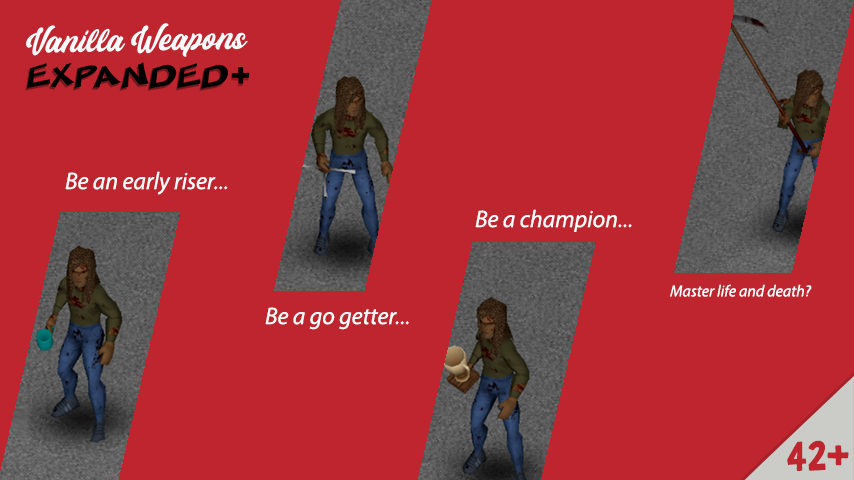
<style>
.page{position:relative;width:854px;height:480px;background:#be252e}
.page>*{position:absolute;margin:0}
.t1{font:30px "Helmida-Regular";color:#ffffff}
.t2{font:18px "Helmida-Regular";color:#000000}
.t3{font:28px "SFMincedMeatExtended";color:#000000}
.t4{font:30px "GranstanderClean"}
.t5{font:30px "GranstanderClean";color:#000000}
.t6{font:24px "MyriadPro-It";color:#ffffff}
.t7{font:16px "MyriadPro-It";color:#ffffff}
.t8{font:36px "GranstanderClean";color:#be252e}
</style>
<div class="page">
<p class="t1" style="left:26px;top:23px;width:222px;height:34px;rotate:-1deg"><span class="t2"><br><br></span>Vanilla Weapons</p>
<p class="t3" style="left:25px;top:65px;width:202px;height:26px;opacity:0.37">EXPANDED</p>
<p class="t3" style="left:27px;top:62px;width:201px;height:27px">EXPANDED</p>
<p class="t4" style="left:231px;top:69px;width:18px;height:18px">+</p>
<p class="t5" style="left:231px;top:67px;width:19px;height:17px">+</p>
<p class="t6" style="left:65px;top:171px;width:163px;height:24px">Be an early riser...</p>
<p class="t6" style="left:475px;top:209px;width:157px;height:23px">Be a champion...</p>
<p class="t7" style="left:670px;top:284px;width:142px;height:13px">Master life and death?</p>
<p class="t6" style="left:265px;top:307px;width:144px;height:23px">Be a go getter...</p>
<p class="t8" style="left:787px;top:440px;width:62px;height:31px">42+</p>
</div>
